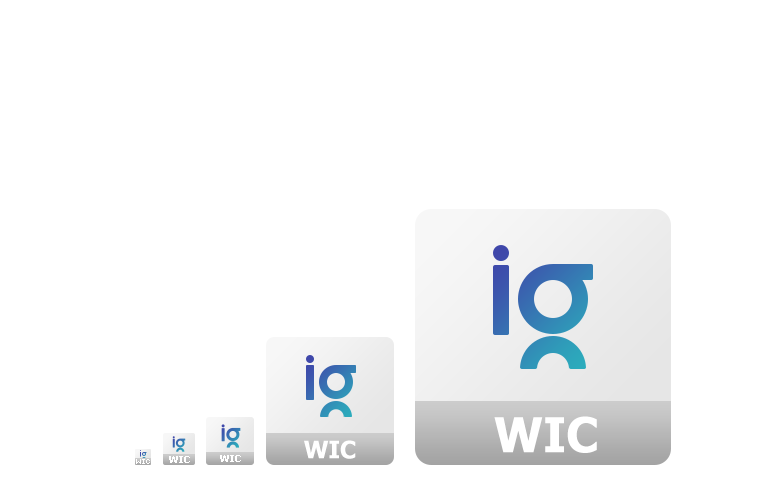
<style>
.page{position:relative;width:768px;height:480px;background:#ffffff}
.page>*{position:absolute;margin:0}
.t1{font:48px "Tahoma-Bold";color:#ffffff}
.t2{font:24px "Tahoma-Bold";color:#ffffff}
.t3{font:10px "Tahoma-Bold";color:#ffffff}
</style>
<div class="page">
<p class="t1" style="left:494px;top:416px;width:103px;height:37px">WIC</p>
<p class="t2" style="left:304px;top:440px;width:52px;height:19px">WIC</p>
<p class="t3" style="left:169px;top:456px;width:21px;height:7px">WIC</p>
<p class="t3" style="left:220px;top:455px;width:21px;height:7px">WIC</p>
</div>
